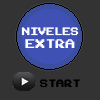
<style>
.page{position:relative;width:100px;height:100px;background:#333333}
.page>*{position:absolute;margin:0}
.t1{font:8.5px "NES-Chimera";color:#ffffff;scale:0.96 1}
.t2{font:10px "NES-Chimera";color:#ffffff}
.t3{font:8.5px "NES-Chimera";color:#000000;scale:0.96 1}
</style>
<div class="page">
<p class="t1" style="left:21px;top:27px;width:58px;height:9px">NIVELES</p>
<p class="t2" style="left:25px;top:39px;width:50px;height:9px">EXTRA</p>
<p class="t3" style="left:39px;top:79px;width:41px;height:9px">START</p>
</div>
